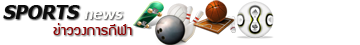
<style>
.page{position:relative;width:360px;height:45px;background:#ffffff}
.page>*{position:absolute;margin:0}
.t1{font:18.7px "Tahoma-Bold";color:#0c0c0c;font-style:italic}
.t2{font:14.7px "Tahoma-Bold";color:#fefefc;font-style:italic}
.t3{font:15.6px "supermarket";color:#8d0101;scale:1.11 1}
</style>
<div class="page">
<p class="t1" style="left:3px;top:5px;width:120px;height:14px">SPORTS <span class="t2">news</span></p>
<p class="t3" style="left:53px;top:23px;width:79px;height:12px">ข่าววงการกีฬา</p>
</div>
